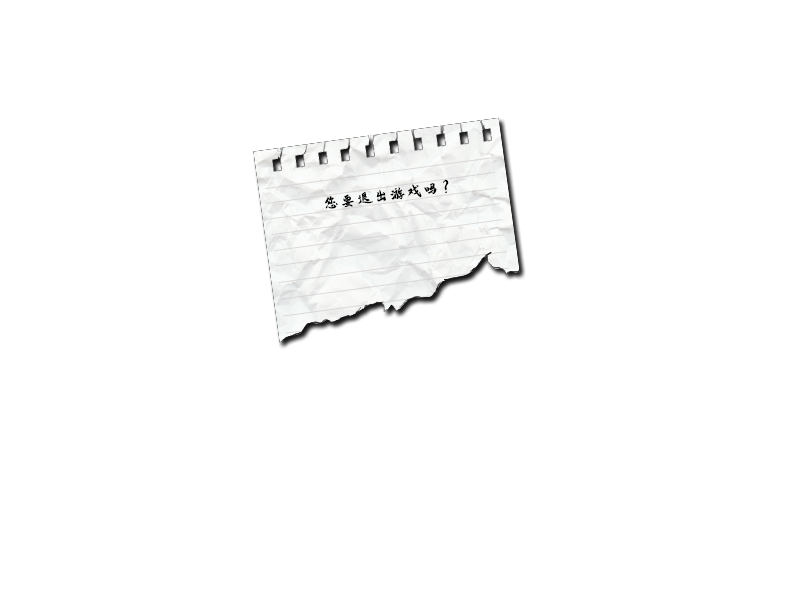
<style>
.page{position:relative;width:800px;height:600px;background:#ffffff}
.page>*{position:absolute;margin:0}
.t1{font:18.8px "slideyouran-Regular";color:#000000}
</style>
<div class="page">
<p class="t1" style="left:325px;top:179px;width:124px;height:30px;rotate:-8deg">您要退出游戏吗?</p>
</div>
